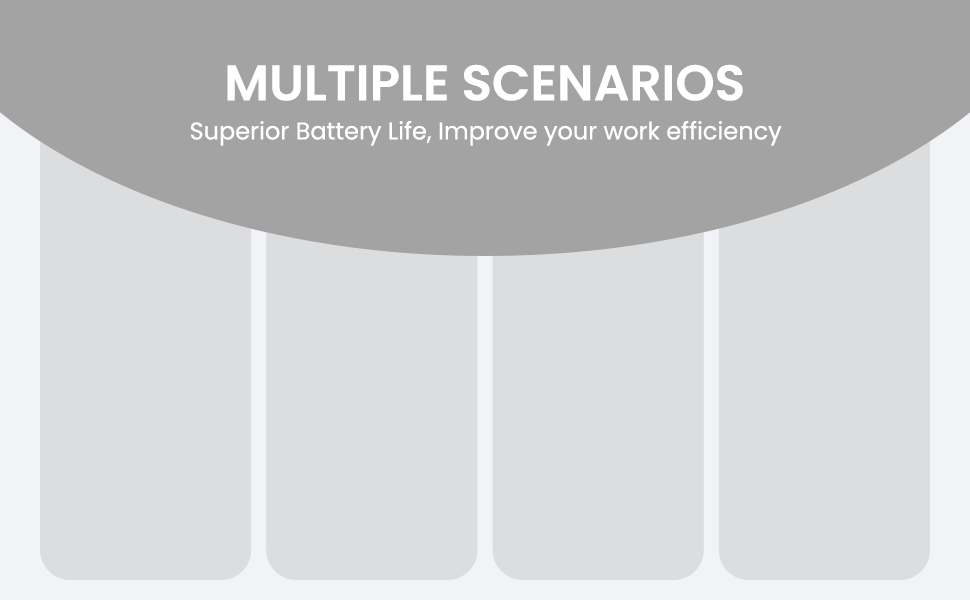
<style>
.page{position:relative;width:970px;height:600px;background:#dcdddf}
.page>*{position:absolute;margin:0}
.t1{font:50px "Poppins-SemiBold";color:#ffffff;text-transform:uppercase}
.t2{font:24px "Poppins-Regular";color:#ffffff}
</style>
<div class="page">
<p class="t1" style="left:227px;top:64px;width:516px;height:37px">Multiple Scenarios</p>
<p class="t2" style="left:190px;top:121px;width:592px;height:25px">Superior Battery Life, Improve your work efficiency</p>
</div>
